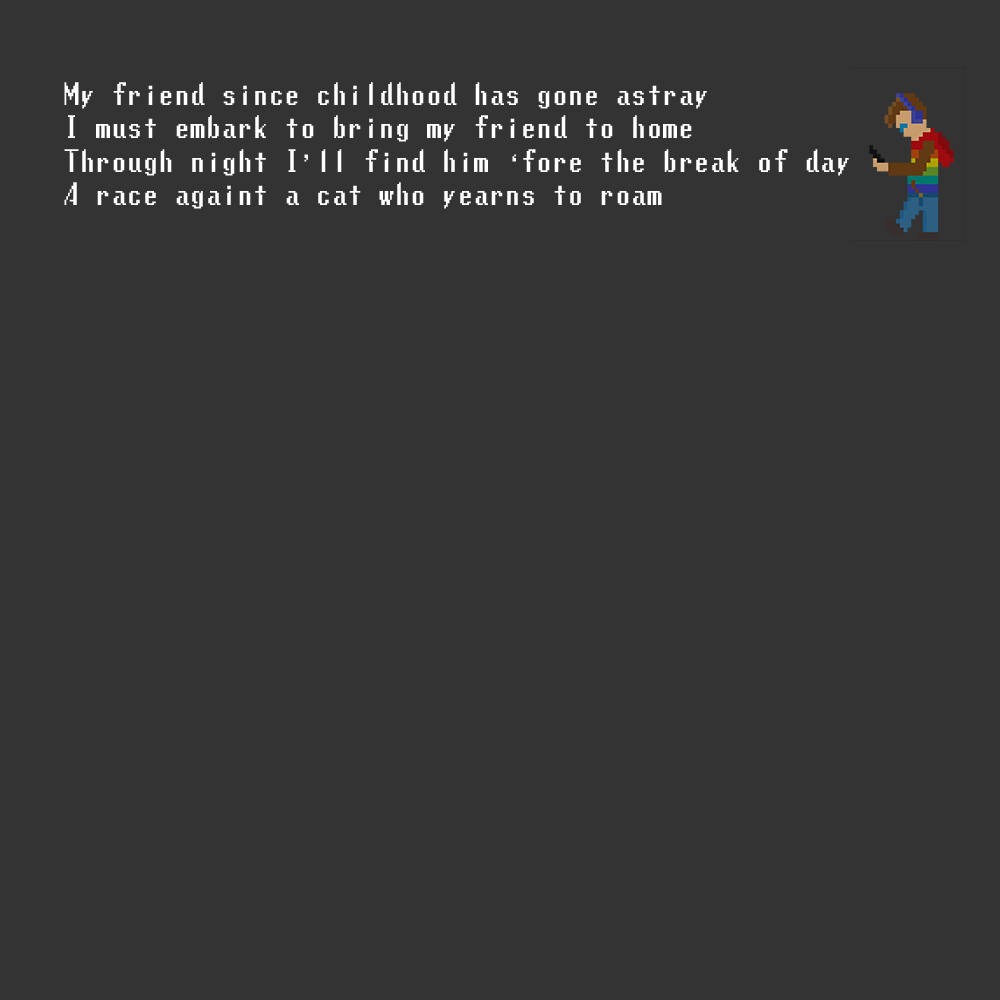
<style>
.page{position:relative;width:1000px;height:1000px;background:#333333}
.page>*{position:absolute;margin:0}
.t1{font:28px "LunchtimeDoublySoReg";color:#ffffff}
</style>
<div class="page">
<p class="t1" style="left:64px;top:82px;width:785px;height:127px">My friend since childhood has gone astray<br>I must embark to bring my friend to home<br>Through night I’ll find him ‘fore the break of day<br>A race againt a cat who yearns to roam</p>
</div>
